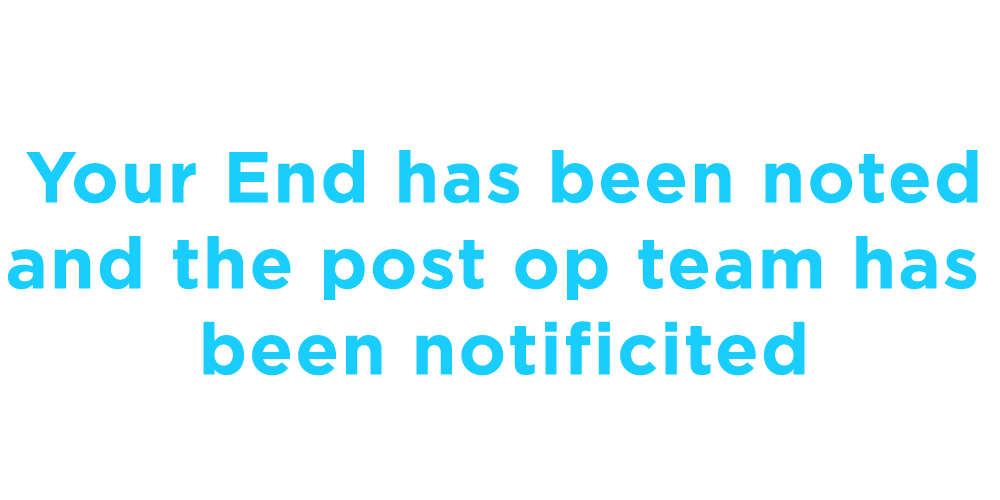
<style>
.page{position:relative;width:1000px;height:500px;background:#ffffff}
.page>*{position:absolute;margin:0}
.t1{font:71.6px "Gotham-Bold";letter-spacing:0.03em;color:#19ceff}
</style>
<div class="page">
<p class="t1" style="left:8px;top:150px;width:970px;height:226px;text-align:center">Your End has been noted<br>and the post op team has <br>been notificited</p>
</div>
